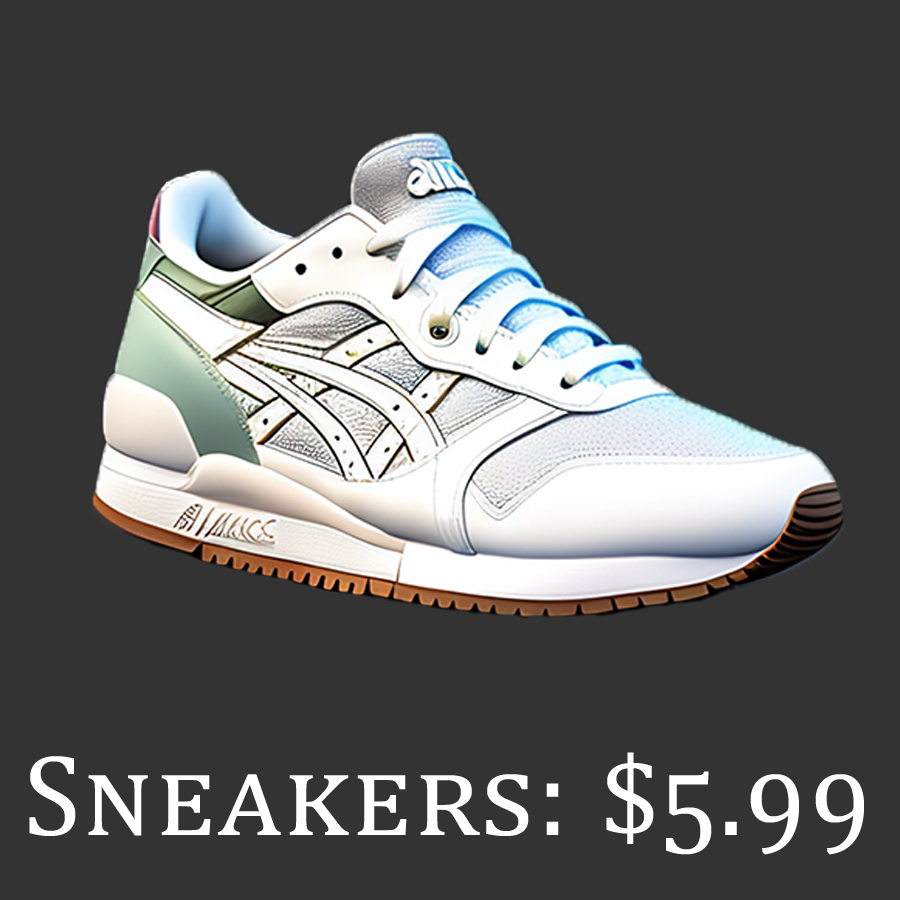
<style>
.page{position:relative;width:900px;height:900px;background:#333333}
.page>*{position:absolute;margin:0}
.t1{font:116.7px "Cambria";letter-spacing:0.025em;color:#ffffff;font-variant:small-caps}
</style>
<div class="page">
<p class="t1" style="left:29px;top:752px;width:835px;height:103px">Sneakers: $5.99</p>
</div>
